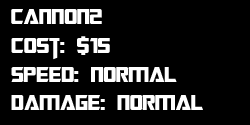
<style>
.page{position:relative;width:250px;height:125px;background:#000000}
.page>*{position:absolute;margin:0}
.t1{font:24px "TransformersMovie";color:#ffffff}
</style>
<div class="page">
<p class="t1" style="left:11px;top:9px;width:192px;height:101px">cannon2<br>Cost: $15<br>Speed: Normal<br>Damage: Normal</p>
</div>
